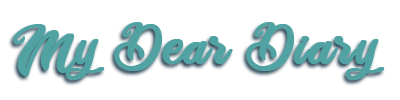
<style>
.page{position:relative;width:400px;height:100px;background:#ffffff}
.page>*{position:absolute;margin:0}
.t1{font:60px "BalletHarmony";color:#51a3a3;font-weight:bold}
</style>
<div class="page">
<p class="t1" style="left:13px;top:22px;width:372px;height:58px">My Dear Diary</p>
</div>
